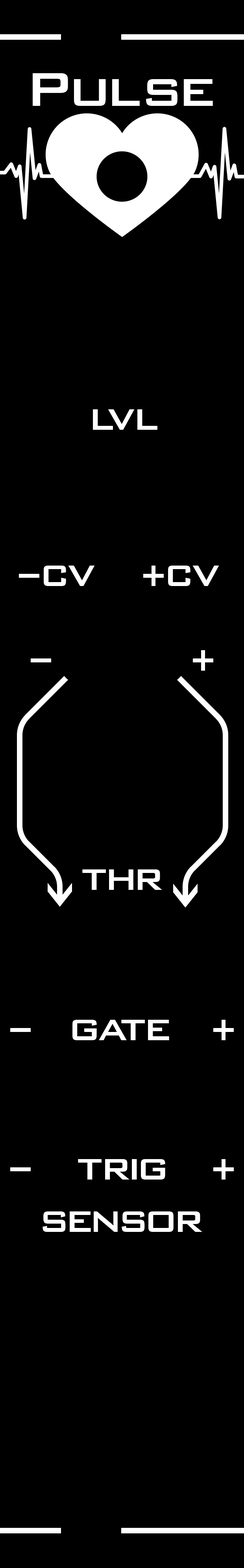
<style>
.page{position:relative;width:244px;height:1568px;background:#000000}
.page>*{position:absolute;margin:0}
.t1{font:63px "BankGothicBT-Medium";letter-spacing:-0.08em;color:#ffffff}
.t2{font:63px "BankGothicBT-Medium";letter-spacing:-0.05em;color:#ffffff}
.t3{font:63px "BankGothicBT-Medium";color:#ffffff}
.t4{font:39.4px "BankGothicBT-Medium";letter-spacing:-0.06em;color:#ffffff}
.t5{font:39.4px "BankGothicBT-Medium";letter-spacing:-0.15em;color:#ffffff}
.t6{font:39.4px "BankGothicBT-Medium";letter-spacing:-0.14em;color:#ffffff}
.t7{font:39.4px "BankGothicBT-Medium";letter-spacing:-0.08em;color:#ffffff}
.t8{font:39.4px "BankGothicBT-Medium";letter-spacing:-0.12em;color:#ffffff}
</style>
<div class="page">
<p class="t1" style="left:33px;top:73px;width:180px;height:33px"><span class="t2">P</span>u<span class="t3">l</span>se</p>
<p class="t4" style="left:93px;top:409px;width:64px;height:21px">LVL</p>
<p class="t4" style="left:44px;top:566px;width:51px;height:20px">CV</p>
<p class="t4" style="left:168px;top:566px;width:51px;height:20px">CV</p>
<p class="t4" style="left:82px;top:869px;width:80px;height:21px">T<span class="t5">H</span><span class="t6">R</span></p>
<p class="t4" style="left:72px;top:1020px;width:97px;height:20px"><span class="t7">G</span><span class="t8">A</span>TE</p>
<p class="t4" style="left:78px;top:1159px;width:87px;height:21px">T<span class="t8">R</span><span class="t6">I</span>G</p>
<p class="t6" style="left:43px;top:1211px;width:159px;height:21px">SENSOR</p>
</div>
